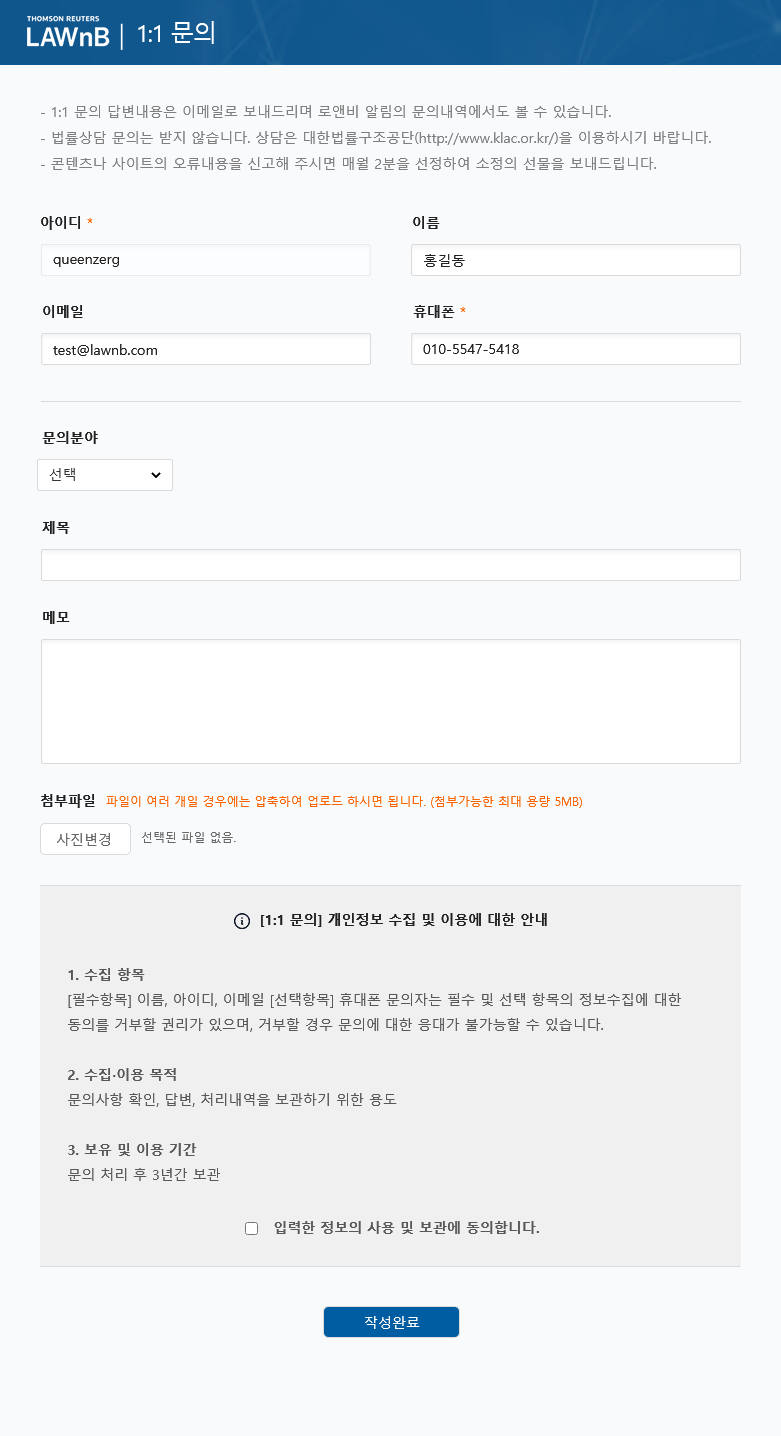
<style>
.page{position:relative;width:781px;height:1436px;background:#f8fafc}
.page>*{position:absolute;margin:0}
.t1{font:24px "MalgunGothic";letter-spacing:-0.06em;color:#ffffff}
.t2{font:14px/26px "MalgunGothic";color:#7f7f7f}
.t3{font:14px "MalgunGothicBold";color:#212121}
.t4{font:14px "MalgunGothic";letter-spacing:-0.06em;color:#fa6400}
.t5{font:14px "MalgunGothic";color:#212121}
.t6{font:14px "MalgunGothic";color:#333333}
.t7{font:12px "MalgunGothic";color:#fa6400}
.t8{font:14px "MalgunGothic";color:#666666}
.t9{font:12px "MalgunGothic";color:#666666}
.t10{font:14px/25px "MalgunGothic";color:#585858}
.t11{font:14px/25px "MalgunGothicBold";color:#585858}
.t12{font:14px "MalgunGothicBold";color:#585858}
.t13{font:14px "MalgunGothic";color:#ffffff}
</style>
<div class="page">
<p class="t1" style="left:138px;top:21px;width:76px;height:23px">1:1 문의</p>
<p class="t2" style="left:41px;top:105px;width:670px;height:65px">- 1:1 문의 답변내용은 이메일로 보내드리며 로앤비 알림의 문의내역에서도 볼 수 있습니다.<br>- 법률상담 문의는 받지 않습니다. 상담은 대한법률구조공단(http://www.klac.or.kr/)을 이용하시기 바랍니다.<br>- 콘텐츠나 사이트의 오류내용을 신고해 주시면 매월 2분을 선정하여 소정의 선물을 보내드립니다.</p>
<p class="t3" style="left:41px;top:216px;width:52px;height:14px">아이디 <span class="t4">*</span></p>
<p class="t3" style="left:413px;top:216px;width:27px;height:13px">이름</p>
<p class="t5" style="left:53px;top:257px;width:66px;height:10px">queenzerg</p>
<p class="t5" style="left:424px;top:254px;width:41px;height:13px">홍길동</p>
<p class="t3" style="left:43px;top:305px;width:40px;height:13px">이메일</p>
<p class="t3" style="left:413px;top:305px;width:53px;height:13px">휴대폰 <span class="t4">*</span></p>
<p class="t5" style="left:53px;top:344px;width:104px;height:12px">test@lawnb.com</p>
<p class="t5" style="left:423px;top:344px;width:96px;height:10px">010-5547-5418</p>
<p class="t3" style="left:42px;top:431px;width:56px;height:13px">문의분야</p>
<p class="t6" style="left:49px;top:468px;width:26px;height:13px">선택</p>
<p class="t3" style="left:42px;top:521px;width:28px;height:13px">제목</p>
<p class="t3" style="left:43px;top:611px;width:27px;height:13px">메모</p>
<p class="t7" style="left:41px;top:794px;width:541px;height:14px"><span class="t3">첨부파일  </span>파일이 여러 개일 경우에는 압축하여 업로드 하시면 됩니다. (첨부가능한 최대 용량 5MB)</p>
<p class="t8" style="left:57px;top:833px;width:53px;height:13px">사진변경</p>
<p class="t9" style="left:142px;top:832px;width:94px;height:11px">선택된 파일 없음.</p>
<p class="t3" style="left:261px;top:913px;width:286px;height:14px">[1:1 문의] 개인정보 수집 및 이용에 대한 안내</p>
<p class="t10" style="left:68px;top:968px;width:613px;height:213px"><span class="t11">1. 수집 항목<br></span>[필수항목] 이름, 아이디, 이메일 [선택항목] 휴대폰 문의자는 필수 및 선택 항목의 정보수집에 대한 동의를 거부할 권리가 있으며, 거부할 경우 문의에 대한 응대가 불가능할 수 있습니다.<br><br><span class="t11">2. 수집∙이용 목적<br></span>문의사항 확인, 답변, 처리내역을 보관하기 위한 용도<br><br><span class="t11">3. 보유 및 이용 기간<br></span>문의 처리 후 3년간 보관</p>
<p class="t12" style="left:274px;top:1221px;width:265px;height:13px">입력한 정보의 사용 및 보관에 동의합니다.</p>
<p class="t13" style="left:365px;top:1316px;width:55px;height:13px">작성완료</p>
</div>
